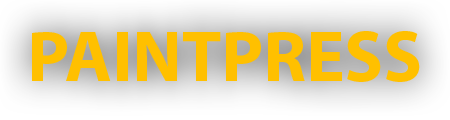
<style>
.page{position:relative;width:450px;height:120px}
.page>*{position:absolute;margin:0}
.t1{font:72px "MyriadPro-Bold";color:#ffc000}
</style>
<div class="page">
<p class="t1" style="left:32px;top:31px;width:388px;height:51px">PAINTPRESS</p>
</div>
